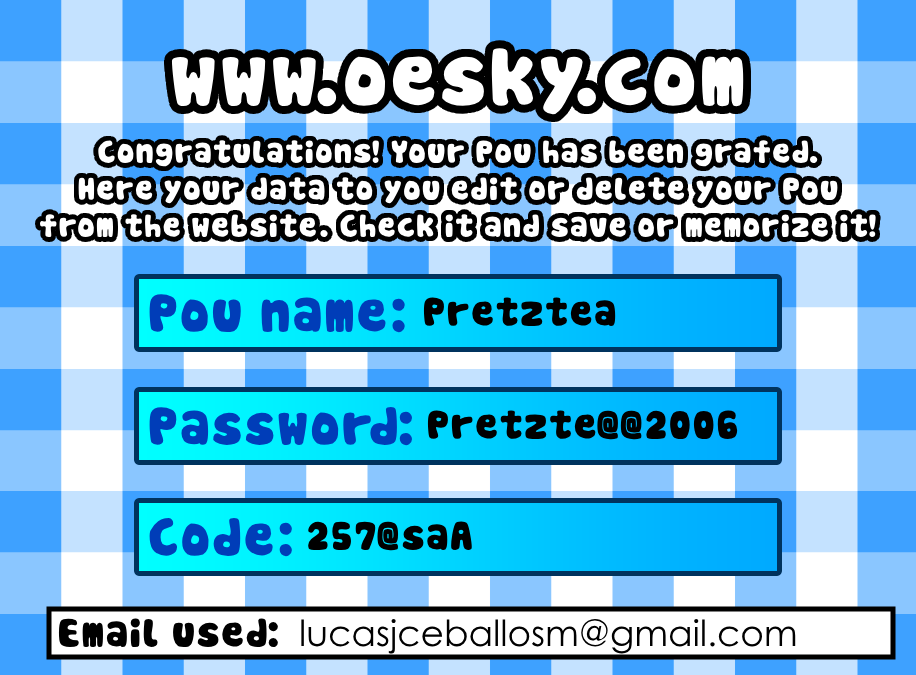
<style>
.page{position:relative;width:916px;height:675px;background:#ffffff}
.page>*{position:absolute;margin:0}
.t1{font:79px "Pou";color:#ffffff}
.t2{font:31px "Pou";color:#ffffff}
.t3{font:52px "Pou";color:#003db8}
.t4{font:39px "Pou";color:#000000}
.t5{font:36px "CenturyGothic";color:#000000}
</style>
<div class="page">
<p class="t1" style="left:171px;top:48px;width:573px;height:67px">www.oesky.com</p>
<p class="t2" style="left:40px;top:140px;width:836px;height:97px;text-align:center">Congratulations! Your Pou has been grafed.<br>Here your data to you edit or delete your Pou<br>from the website. Check it and save or memorize it!</p>
<p class="t3" style="left:149px;top:294px;width:256px;height:39px">Pou name:</p>
<p class="t4" style="left:423px;top:297px;width:193px;height:29px">Pretztea</p>
<p class="t3" style="left:149px;top:407px;width:263px;height:39px">Password:</p>
<p class="t4" style="left:427px;top:410px;width:311px;height:30px">Pretzte@@2006</p>
<p class="t3" style="left:149px;top:518px;width:143px;height:39px">Code:</p>
<p class="t4" style="left:308px;top:521px;width:164px;height:30px">257@saA</p>
<p class="t4" style="left:58px;top:618px;width:220px;height:30px">Email used:</p>
<p class="t5" style="left:301px;top:618px;width:495px;height:36px">lucasjceballosm@gmail.com</p>
</div>
